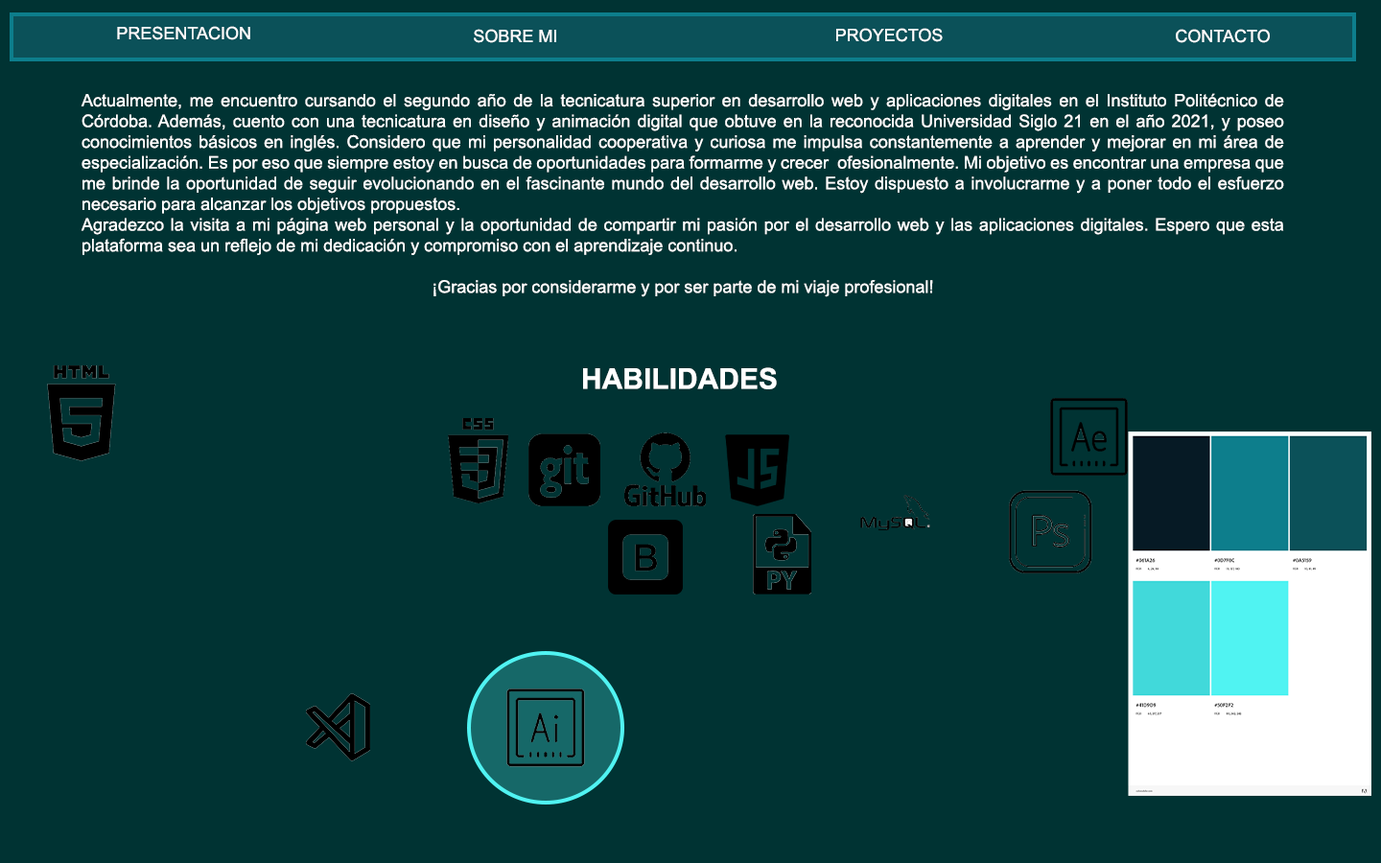
<style>
.page{position:relative;width:1381px;height:863px;background:#003333}
.page>*{position:absolute;margin:0}
.t1{font:17.3px "ArialMT";color:#ffffff}
.t2{font:28.8px "Arial-BoldMT";color:#ffffff}
</style>
<div class="page">
<p class="t1" style="left:117px;top:26px;width:133px;height:14px">PRESENTACION</p>
<p class="t1" style="left:474px;top:29px;width:82px;height:14px">SOBRE MI</p>
<p class="t1" style="left:836px;top:28px;width:107px;height:14px">PROYECTOS</p>
<p class="t1" style="left:1176px;top:29px;width:94px;height:14px">CONTACTO</p>
<p class="t1" style="left:81px;top:93px;width:1203px;height:204px;text-align:justify">Actualmente, me encuentro cursando el segundo año de la tecnicatura superior en desarrollo web y aplicaciones digitales en el Instituto Politécnico de Córdoba. Además, cuento con una tecnicatura en diseño y animación digital que obtuve en la reconocida Universidad Siglo 21 en el año 2021, y poseo conocimientos básicos en inglés. Considero que mi personalidad cooperativa y curiosa me impulsa constantemente a aprender y mejorar en mi área de especialización. Es por eso que siempre estoy en busca de oportunidades para formarme y crecer  ofesionalmente. Mi objetivo es encontrar una empresa que me brinde la oportunidad de seguir evolucionando en el fascinante mundo del desarrollo web. Estoy dispuesto a involucrarme y a poner todo el esfuerzo necesario para alcanzar los objetivos propuestos.<br>Agradezco la visita a mi página web personal y la oportunidad de compartir mi pasión por el desarrollo web y las aplicaciones digitales. Espero que esta plataforma sea un reflejo de mi dedicación y compromiso con el aprendizaje continuo.<br><br>¡Gracias por considerarme y por ser parte de mi viaje profesional!</p>
<p class="t2" style="left:583px;top:367px;width:194px;height:22px">HABILIDADES</p>
</div>
